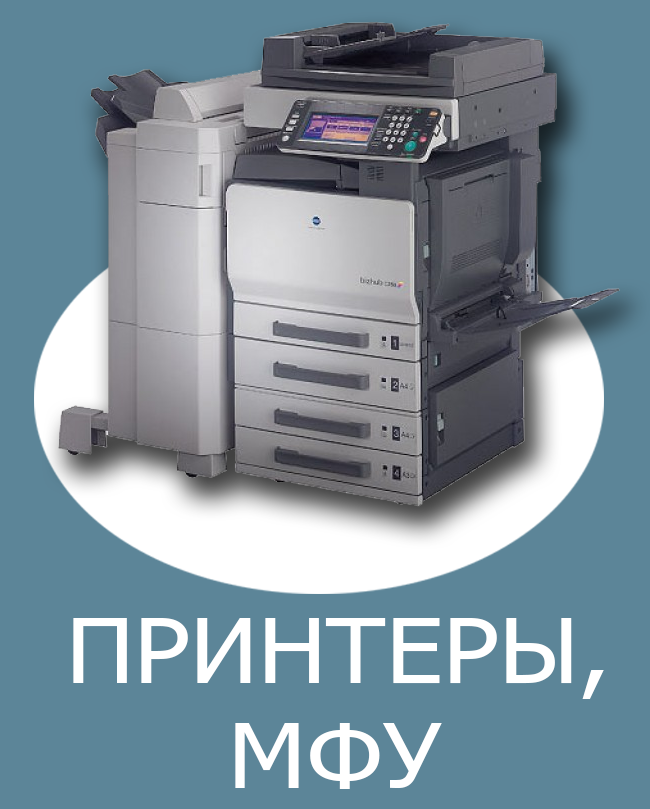
<style>
.page{position:relative;width:650px;height:809px;background:#5c8598}
.page>*{position:absolute;margin:0}
.t1{font:90px "Tahoma";color:#ffffff;scale:1.13 1}
</style>
<div class="page">
<p class="t1" style="left:73px;top:618px;width:531px;height:81px">ПРИНТЕРЫ,</p>
<p class="t1" style="left:235px;top:723px;width:207px;height:66px">МФУ</p>
</div>
